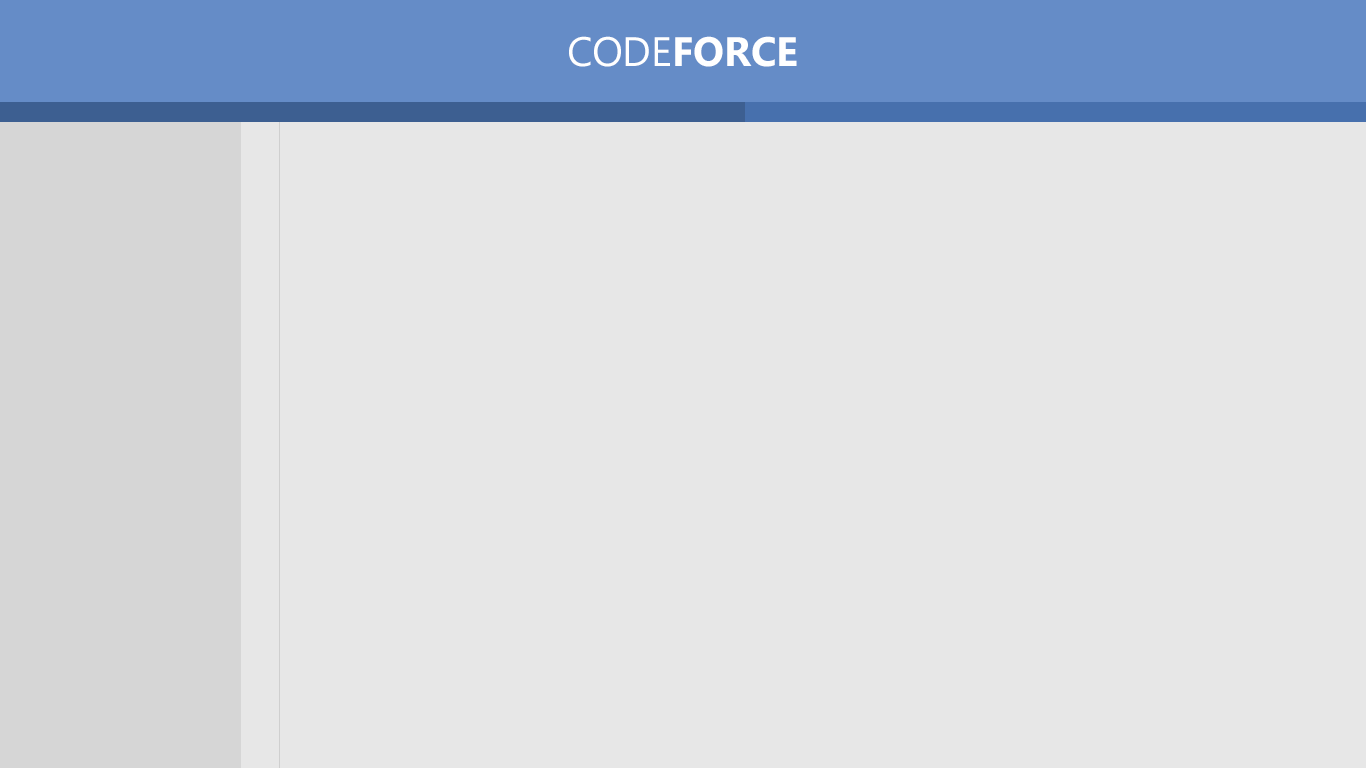
<style>
.page{position:relative;width:1366px;height:768px;background:#e7e7e7}
.page>*{position:absolute;margin:0}
.t1{font:41px "SegoeUI-Bold";color:#ffffff;text-transform:uppercase}
.t2{font:41px "SegoeUI";color:#ffffff;text-transform:uppercase}
</style>
<div class="page">
<p class="t1" style="left:569px;top:36px;width:228px;height:31px"><span class="t2">Code</span>Force</p>
</div>
